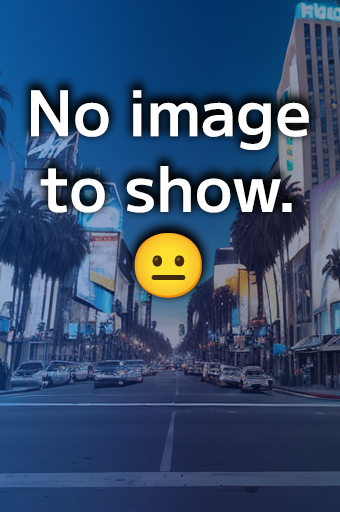
<style>
.page{position:relative;width:340px;height:512px}
.page>*{position:absolute;margin:0}
.t1{font:63px "MPLUS1-SemiBold";color:#ffffff}
.t2{font:63px "NotoColorEmoji-SVG";color:#ffffff}
</style>
<div class="page">
<p class="t1" style="left:31px;top:90px;width:278px;height:208px;text-align:center">No image<br>to show.<br><span class="t2">😐</span></p>
</div>
